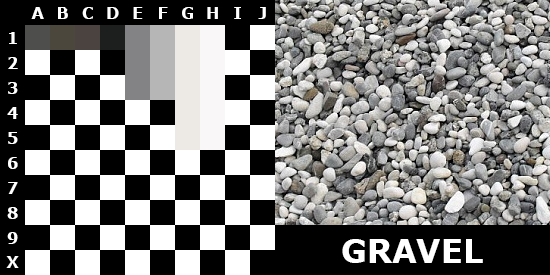
<style>
.page{position:relative;width:550px;height:275px;background:#000000}
.page>*{position:absolute;margin:0}
.t1{font:16px "Verdana-Bold";color:#ffffff}
.t2{font:32px "Verdana-Bold";color:#ffffff}
</style>
<div class="page">
<p class="t1" style="left:31px;top:7px;width:13px;height:12px">A</p>
<p class="t1" style="left:58px;top:7px;width:10px;height:12px">B</p>
<p class="t1" style="left:82px;top:7px;width:11px;height:12px">C</p>
<p class="t1" style="left:107px;top:7px;width:12px;height:12px">D</p>
<p class="t1" style="left:133px;top:7px;width:10px;height:12px">E</p>
<p class="t1" style="left:159px;top:7px;width:9px;height:12px">F</p>
<p class="t1" style="left:182px;top:7px;width:11px;height:12px">G</p>
<p class="t1" style="left:207px;top:7px;width:11px;height:12px">H</p>
<p class="t1" style="left:234px;top:7px;width:7px;height:12px">I</p>
<p class="t1" style="left:258px;top:7px;width:8px;height:12px">J</p>
<p class="t1" style="left:9px;top:32px;width:8px;height:12px">1</p>
<p class="t1" style="left:8px;top:57px;width:10px;height:12px">2</p>
<p class="t1" style="left:8px;top:82px;width:10px;height:12px">3</p>
<p class="t1" style="left:7px;top:107px;width:11px;height:12px">4</p>
<p class="t1" style="left:8px;top:132px;width:10px;height:12px">5</p>
<p class="t1" style="left:8px;top:157px;width:10px;height:12px">6</p>
<p class="t1" style="left:8px;top:182px;width:10px;height:12px">7</p>
<p class="t1" style="left:7px;top:207px;width:11px;height:12px">8</p>
<p class="t1" style="left:7px;top:232px;width:11px;height:12px">9</p>
<p class="t2" style="left:342px;top:239px;width:141px;height:24px">GRAVEL</p>
<p class="t1" style="left:6px;top:256px;width:13px;height:12px">X</p>
</div>
